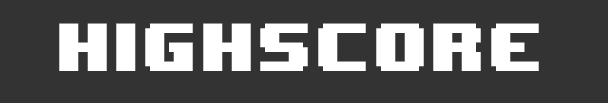
<style>
.page{position:relative;width:608px;height:103px;background:#333333}
.page>*{position:absolute;margin:0}
.t1{font:57px "8BITWONDERNominal";letter-spacing:0.01em;color:#ffffff}
</style>
<div class="page">
<p class="t1" style="left:59px;top:23px;width:480px;height:48px">HIGHSCORE</p>
</div>
